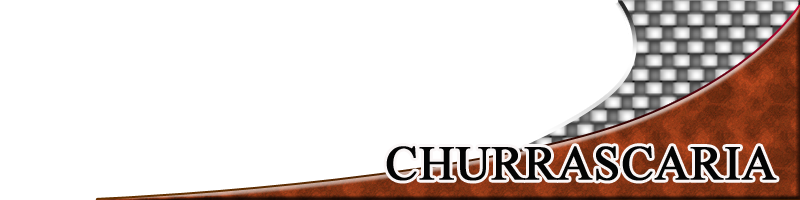
<style>
.page{position:relative;width:800px;height:200px;background:#ffffff}
.page>*{position:absolute;margin:0}
.t1{font:48px "TimesNewRomanPSMT";color:#040404;font-weight:bold}
</style>
<div class="page">
<p class="t1" style="left:386px;top:146px;width:391px;height:35px">CHURRASCARIA</p>
</div>
